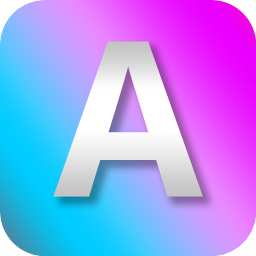
<style>
.page{position:relative;width:256px;height:256px}
.page>*{position:absolute;margin:0}
.t1{font:216px "OpenSans-Bold";color:#eeeeee}
</style>
<div class="page">
<p class="t1" style="left:53px;top:41px;width:150px;height:156px">A</p>
</div>
